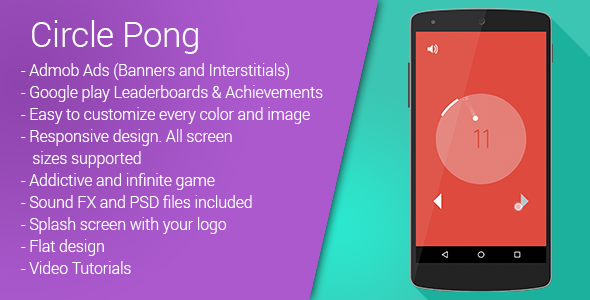
<style>
.page{position:relative;width:590px;height:300px}
.page>*{position:absolute;margin:0}
.t1{font:35px "Roboto-Light";letter-spacing:-0.01em;color:#ffffff}
.t2{font:16px/22px "Roboto-Light";letter-spacing:-0.01em;color:#ffffff}
</style>
<div class="page">
<p class="t1" style="left:32px;top:20px;width:166px;height:34px">Circle Pong</p>
<p class="t2" style="left:21px;top:63px;width:302px;height:211px">- Admob Ads (Banners and Interstitials)<br>- Google play Leaderboards &amp; Achievements<br>- Easy to customize every color and image<br>- Responsive design. All screen <br>   sizes supported<br>- Addictive and infinite game<br>- Sound FX and PSD files included<br>- Splash screen with your logo<br>- Flat design<br>- Video Tutorials</p>
</div>
